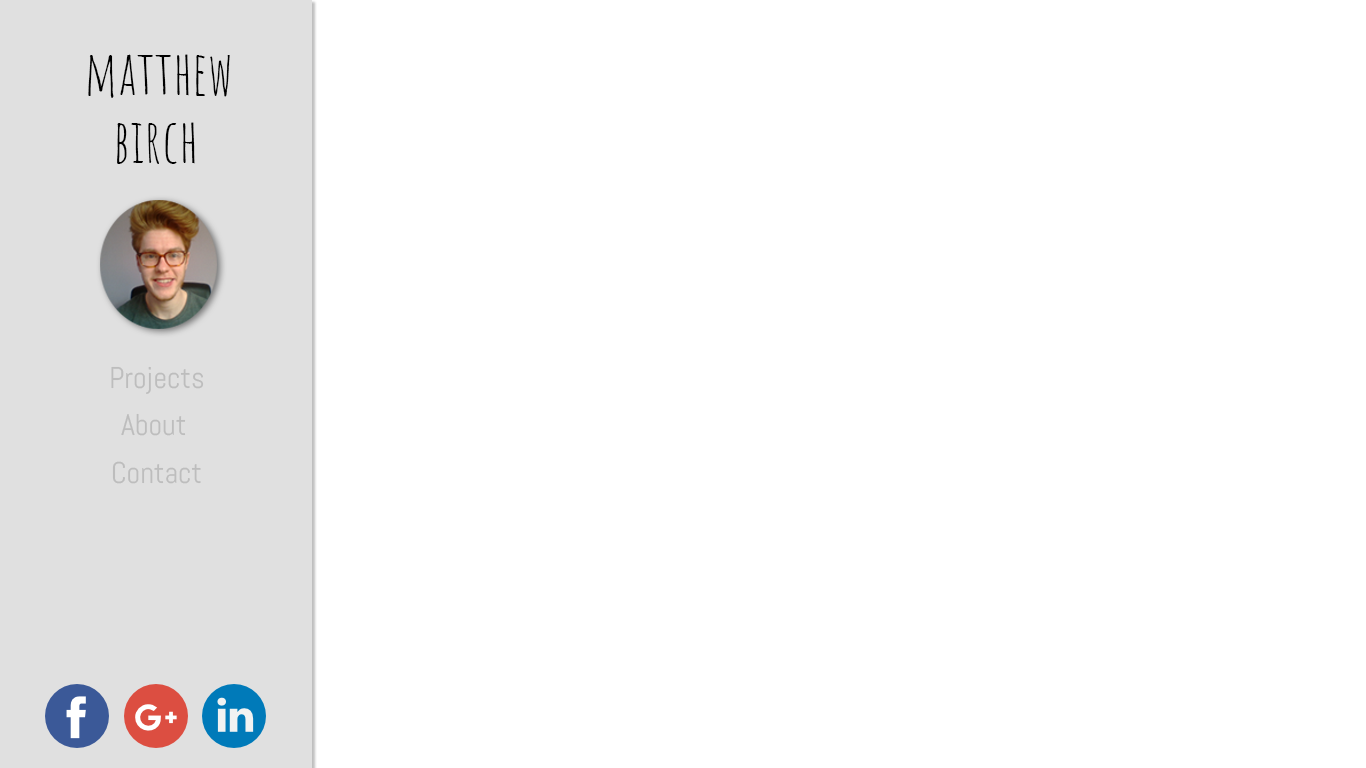
<style>
.page{position:relative;width:1366px;height:768px;background:#ffffff}
.page>*{position:absolute;margin:0}
.t1{font:60px "AmaticSC-Regular";color:#000000}
.t2{font:30px "Abel-Regular";color:#bdbdbd}
</style>
<div class="page">
<p class="t1" style="left:88px;top:54px;width:142px;height:44px">matthew</p>
<p class="t1" style="left:117px;top:122px;width:78px;height:42px">birch</p>
<p class="t2" style="left:111px;top:366px;width:93px;height:28px">Projects</p>
<p class="t2" style="left:121px;top:413px;width:65px;height:23px">About</p>
<p class="t2" style="left:112px;top:461px;width:89px;height:23px">Contact</p>
</div>
